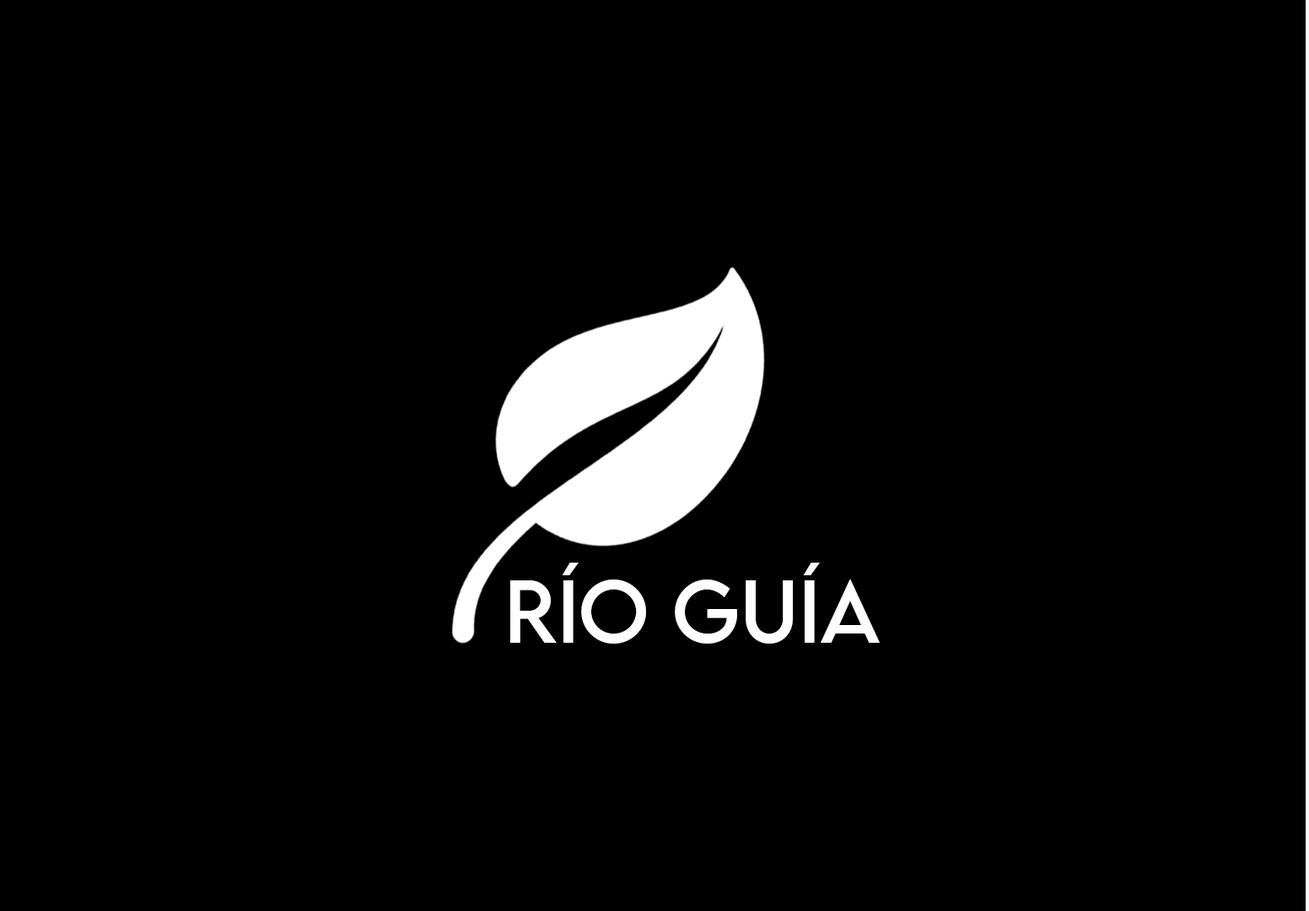
<style>
.page{position:relative;width:1309px;height:911px;background:#000000}
.page>*{position:absolute;margin:0}
.t1{font:79.1px "LEMONMILK-Regular";color:#ffffff}
</style>
<div class="page">
<p class="t1" style="left:510px;top:563px;width:370px;height:81px">Río Guía</p>
</div>
